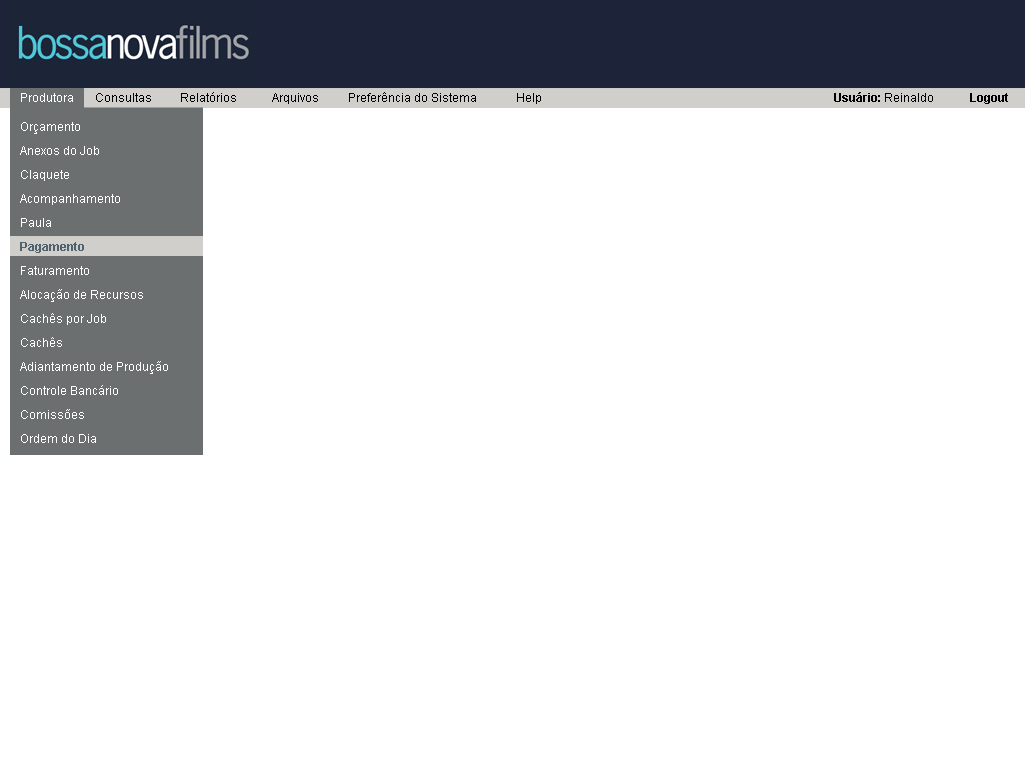
<style>
.page{position:relative;width:1025px;height:768px;background:#ffffff}
.page>*{position:absolute;margin:0}
.t1{font:12px "ArialMT";color:#ffffff}
.t2{font:12px "ArialMT";color:#000000}
.t3{font:12px "Arial-BoldMT";color:#000000}
.t4{font:12px "Arial-BoldMT";color:#010000}
.t5{font:12px/24px "ArialMT";color:#ffffff}
.t6{font:12px/24px "Arial-BoldMT";color:#51626f}
</style>
<div class="page">
<p class="t1" style="left:21px;top:93px;width:52px;height:9px">Produtora</p>
<p class="t2" style="left:96px;top:93px;width:55px;height:9px">Consultas</p>
<p class="t2" style="left:181px;top:92px;width:55px;height:10px">Relatórios</p>
<p class="t2" style="left:272px;top:93px;width:46px;height:11px">Arquivos</p>
<p class="t2" style="left:349px;top:92px;width:127px;height:10px">Preferência do Sistema</p>
<p class="t2" style="left:517px;top:93px;width:24px;height:11px">Help</p>
<p class="t3" style="left:834px;top:92px;width:99px;height:10px">Usuário:<span class="t2"> Reinaldo</span></p>
<p class="t4" style="left:970px;top:93px;width:38px;height:11px">Logout</p>
<p class="t5" style="left:20px;top:122px;width:148px;height:348px">Orçamento<br>Anexos do Job<br>Claquete<br>Acompanhamento<br>Paula<br><span class="t6">Pagamento<br></span>Faturamento<br>Alocação de Recursos<br>Cachês por Job<br>Cachês<br>Adiantamento de Produção<br>Controle Bancário<br>Comissões<br>Ordem do Dia<br>Anexos de Produção</p>
</div>
